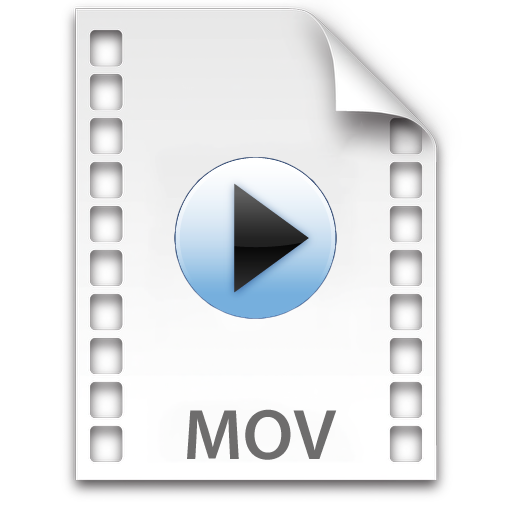
<style>
.page{position:relative;width:512px;height:512px;background:#ffffff}
.page>*{position:absolute;margin:0}
.t1{font:72px "MyriadPro-Semibold";color:#6e6d6d}
</style>
<div class="page">
<p class="t1" style="left:187px;top:409px;width:150px;height:51px">MOV</p>
</div>
